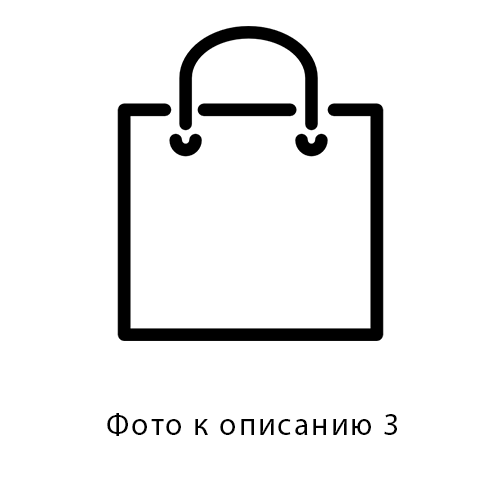
<style>
.page{position:relative;width:500px;height:500px;background:#ffffff}
.page>*{position:absolute;margin:0}
.t1{font:32px "MyriadPro-Regular";letter-spacing:0.06em;color:#000000}
</style>
<div class="page">
<p class="t1" style="left:107px;top:413px;width:290px;height:23px">Фото к описанию 3</p>
</div>
